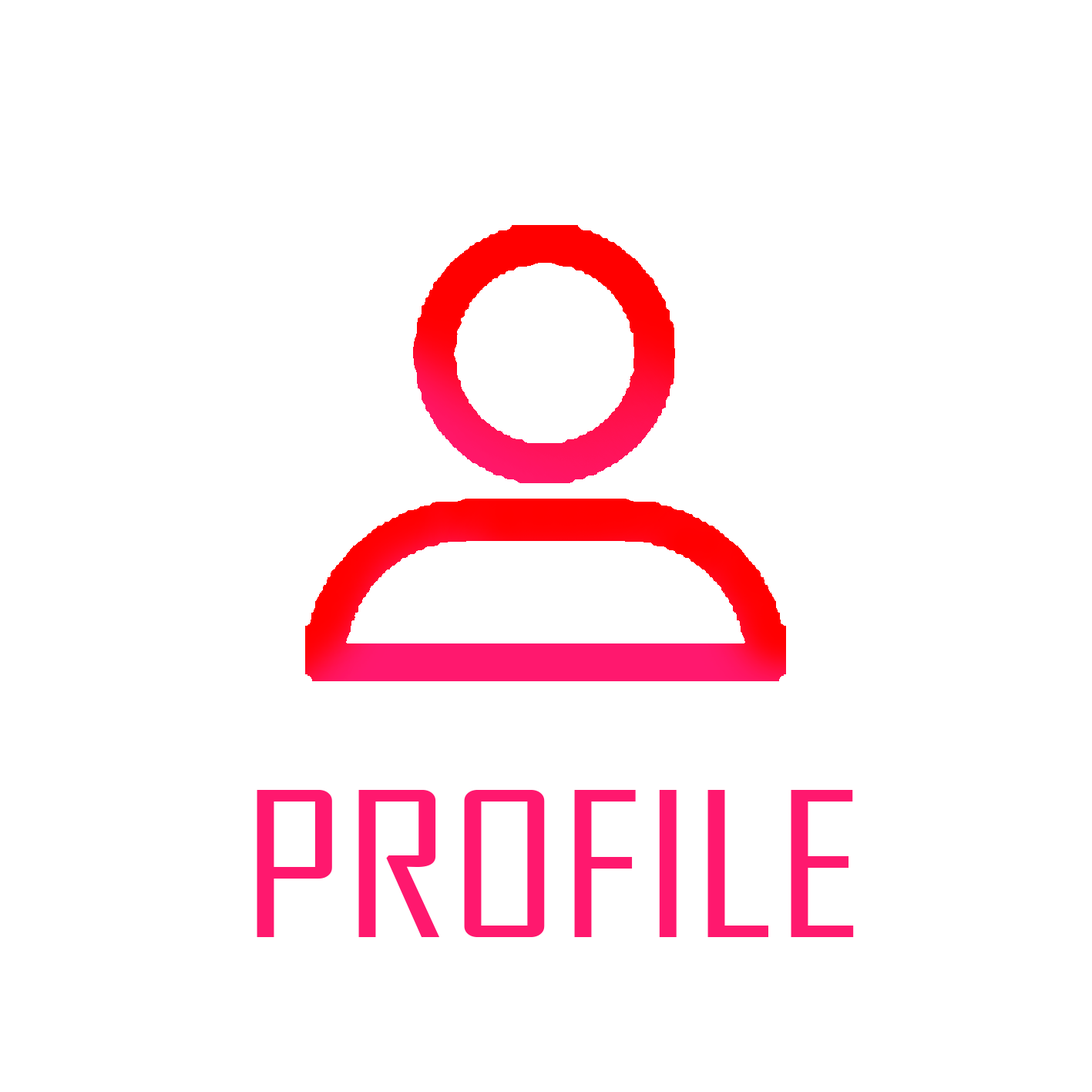
<style>
.page{position:relative;width:1092px;height:1092px;background:#ffffff}
.page>*{position:absolute;margin:0}
.t1{font:192.6px "AgencyFB-Reg";color:#ff186e;scale:1.29 1}
</style>
<div class="page">
<p class="t1" style="left:257px;top:790px;width:597px;height:147px">PROFILE</p>
</div>
